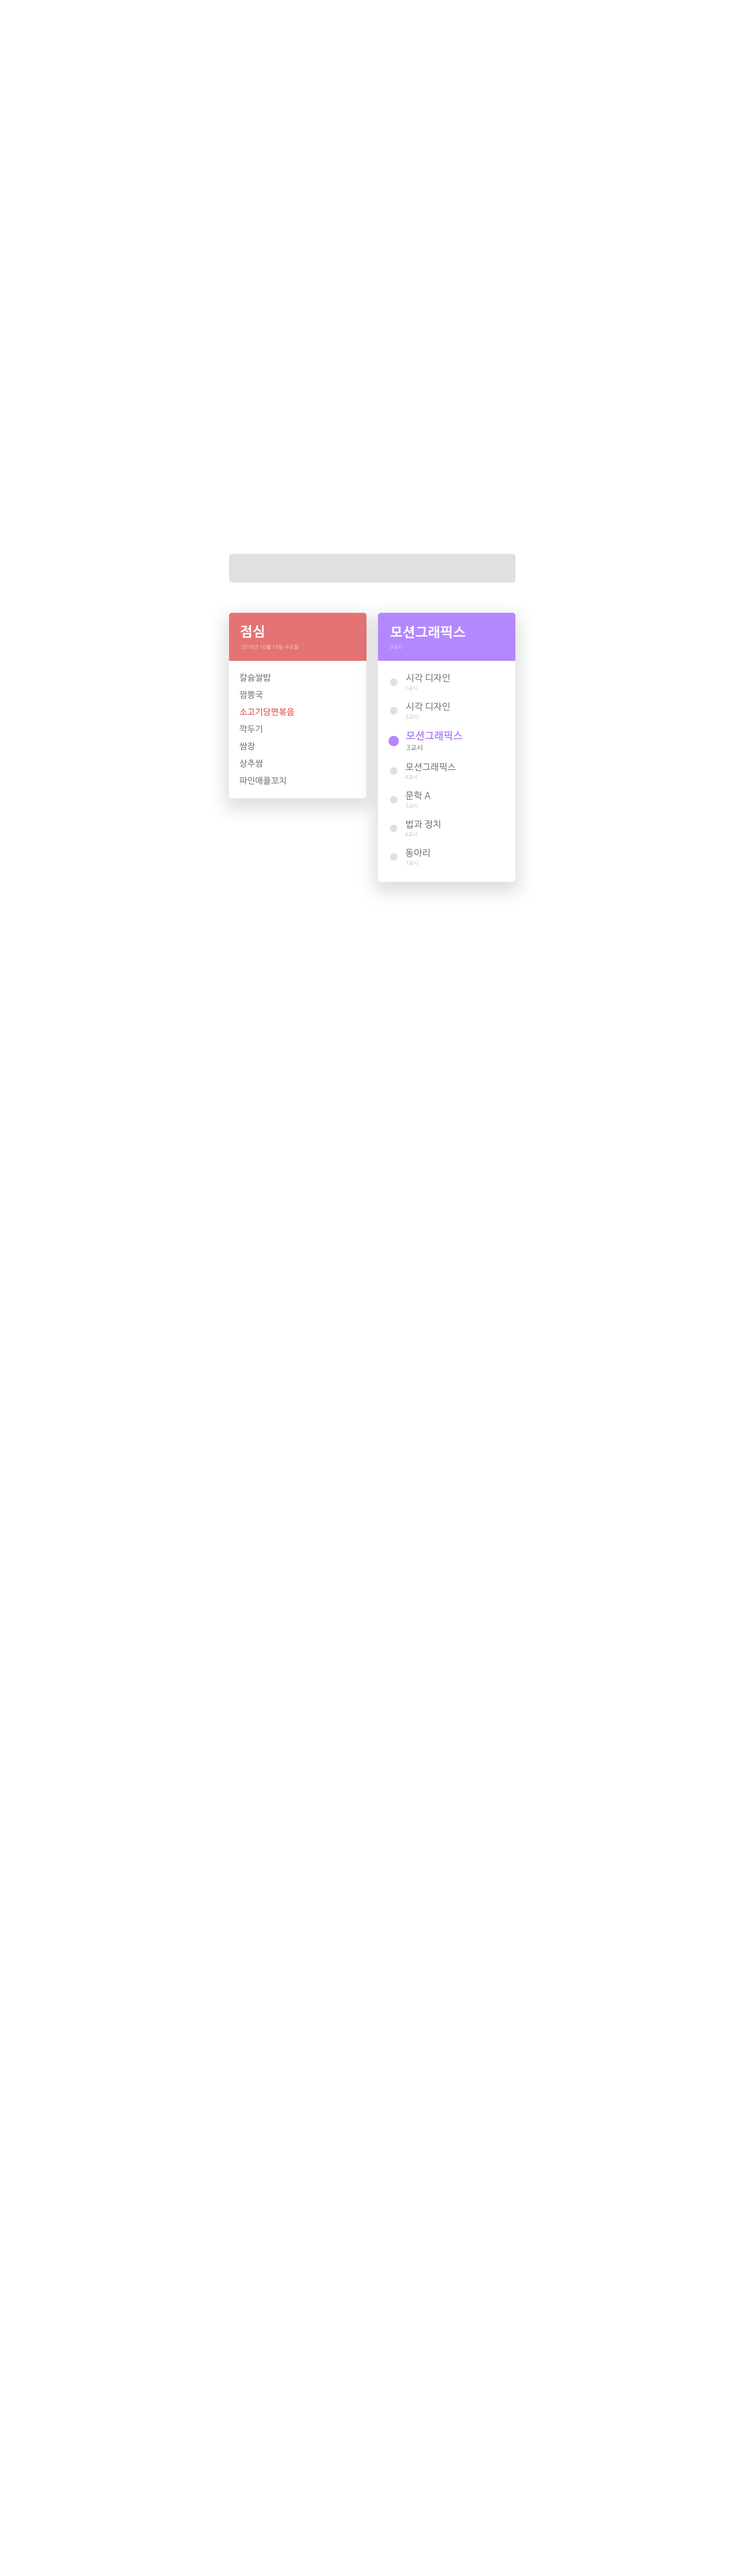
<style>
.page{position:relative;width:733px;height:2576px;background:#ffffff}
.page>*{position:absolute;margin:0}
.t1{font:13.7px "NanumBarunGothicBold";letter-spacing:0.025em;color:#ffffff}
.t2{font:5.2px "NanumBarunGothic";letter-spacing:0.025em;color:#f2c1c1}
.t3{font:5.2px "NanumBarunGothic";letter-spacing:0.025em;color:#dbc9ff}
.t4{font:8.6px/17.2px "NanumBarunGothic";letter-spacing:0.025em;color:#757575}
.t5{font:8.6px/17.2px "NanumBarunGothicBold";letter-spacing:0.025em;color:#e57373}
.t6{font:9.2px "NanumBarunGothic";letter-spacing:0.025em;color:#757575}
.t7{font:5.2px "NanumBarunGothic";letter-spacing:0.025em;color:#c1c1c1}
.t8{font:10.3px "NanumBarunGothicBold";letter-spacing:0.025em;color:#b388ff}
.t9{font:6.9px "NanumBarunGothic";letter-spacing:0.025em;color:#757575}
</style>
<div class="page">
<p class="t1" style="left:240px;top:625px;width:24px;height:13px">점심</p>
<p class="t1" style="left:390px;top:626px;width:75px;height:13px">모션그래픽스</p>
<p class="t2" style="left:241px;top:644px;width:57px;height:5px">2016년 10월 19일 수요일</p>
<p class="t3" style="left:390px;top:645px;width:12px;height:4px">3교시</p>
<p class="t4" style="left:239px;top:673px;width:55px;height:112px">칼슘쌀밥<br>짬뽕국<br><span class="t5">소고기당면볶음<br></span>깍두기<br>쌈장<br>상추쌈<br>파인애플꼬치</p>
<p class="t6" style="left:406px;top:674px;width:43px;height:8px">시각 디자인</p>
<p class="t7" style="left:406px;top:686px;width:11px;height:5px">1교시</p>
<p class="t6" style="left:406px;top:702px;width:43px;height:9px">시각 디자인</p>
<p class="t7" style="left:406px;top:714px;width:11px;height:5px">2교시</p>
<p class="t8" style="left:406px;top:731px;width:56px;height:10px">모션그래픽스</p>
<p class="t9" style="left:406px;top:744px;width:16px;height:7px">3교시</p>
<p class="t6" style="left:405px;top:763px;width:50px;height:8px">모션그래픽스</p>
<p class="t7" style="left:405px;top:775px;width:12px;height:5px">4교시</p>
<p class="t6" style="left:405px;top:791px;width:25px;height:9px">문학 A</p>
<p class="t7" style="left:406px;top:803px;width:11px;height:5px">5교시</p>
<p class="t6" style="left:406px;top:820px;width:34px;height:9px">법과 정치</p>
<p class="t7" style="left:405px;top:832px;width:12px;height:5px">6교시</p>
<p class="t6" style="left:405px;top:849px;width:24px;height:8px">동아리</p>
<p class="t7" style="left:406px;top:861px;width:11px;height:5px">7교시</p>
</div>
